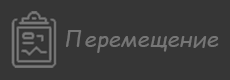
<style>
.page{position:relative;width:230px;height:80px;background:#363636}
.page>*{position:absolute;margin:0}
.t1{font:22.4px "ComicSansMS-Italic";letter-spacing:0.001em;color:#767676}
</style>
<div class="page">
<p class="t1" style="left:66px;top:30px;width:153px;height:23px">Перемещение</p>
</div>
